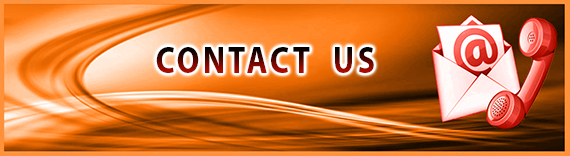
<style>
.page{position:relative;width:570px;height:156px}
.page>*{position:absolute;margin:0}
.t1{font:37.6px "MyriadPro-Bold";letter-spacing:0.1em;scale:0.85 1}
</style>
<div class="page">
<p class="t1" style="left:156px;top:47px;width:218px;height:26px">CONTACT  US</p>
</div>
